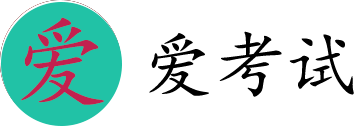
<style>
.page{position:relative;width:354px;height:126px;background:#ffffff}
.page>*{position:absolute;margin:0}
.t1{font:100px "KaiTi";color:#c2214f}
.t2{font:72px "KaiTi";color:#000000}
</style>
<div class="page">
<p class="t1" style="left:21px;top:17px;width:83px;height:88px">爱</p>
<p class="t2" style="left:149px;top:31px;width:205px;height:66px">爱考试</p>
</div>
